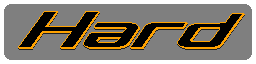
<style>
.page{position:relative;width:256px;height:64px;background:#7f7f7f}
.page>*{position:absolute;margin:0}
.t1{font:66px "Concielian3D";color:#ffa200}
.t2{font:66px "Concielian";color:#000000}
</style>
<div class="page">
<p class="t1" style="left:18px;top:11px;width:227px;height:38px">Hard</p>
<p class="t2" style="left:19px;top:11px;width:223px;height:36px">Hard</p>
</div>
